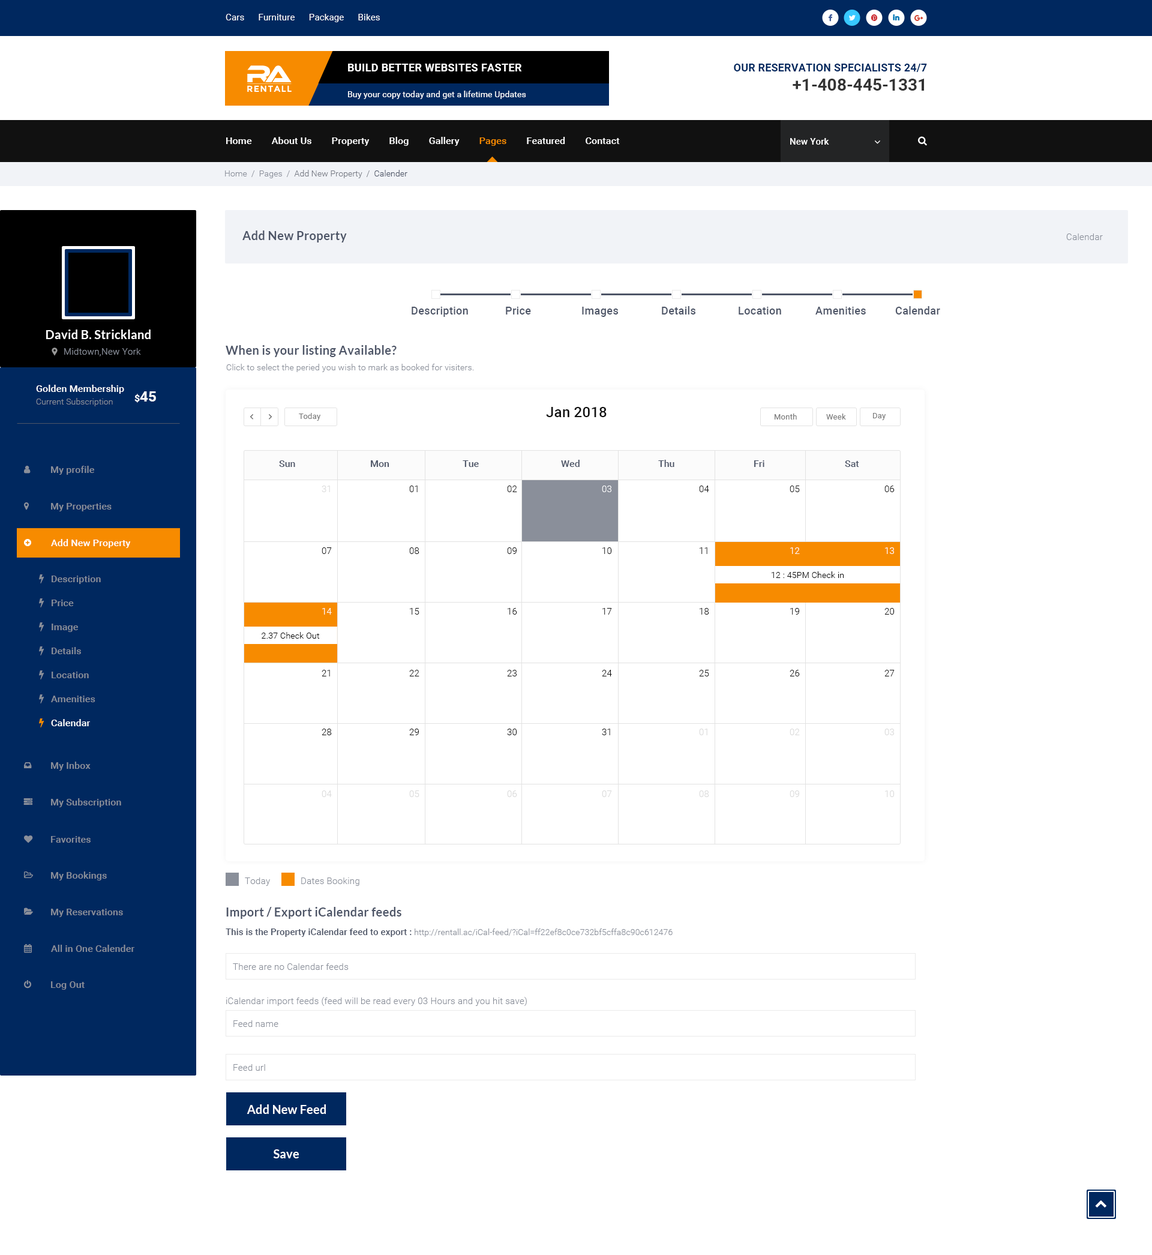
<style>
.page{position:relative;width:1152px;height:1255px;background:#ffffff}
.page>*{position:absolute;margin:0}
.t1{font:9px "Roboto-Regular";letter-spacing:0.01em;color:#ffffff}
.t2{font:10.8px "Roboto-Bold";letter-spacing:0.02em;color:#ffffff;text-transform:uppercase}
.t3{font:10.8px "Roboto-Bold";letter-spacing:0.01em;color:#00285f;text-transform:uppercase}
.t4{font:8.7px "Montserrat-Bold";letter-spacing:0.08em;color:#ffffff;text-transform:uppercase}
.t5{font:16.8px "Roboto-Bold";color:#333333}
.t6{font:8.4px "Roboto-Regular";letter-spacing:0.01em;color:#ffffff}
.t7{font:9.6px "Roboto-Medium";letter-spacing:0.01em;color:#ffffff}
.t8{font:9.6px "Roboto-Medium";letter-spacing:0.01em;color:#f78b00}
.t9{font:9px "Roboto-Medium";letter-spacing:0.01em;color:#ffffff}
.t10{font:8.4px "Roboto-Light";letter-spacing:0.01em;color:#757983}
.t11{font:8.4px "Roboto-Light";letter-spacing:0.01em;color:#8a8f9a}
.t12{font:8.4px "Roboto-Light";letter-spacing:0.01em;color:#4d5567}
.t13{font:12px "Lato-Bold";letter-spacing:0.01em;color:#4d5567}
.t14{font:9px "Roboto-Light";letter-spacing:0.01em;color:#8a8f9a}
.t15{font:10.8px "Roboto-Medium";letter-spacing:0.01em;color:#4d5567}
.t16{font:12px "Lato-Bold";letter-spacing:0.01em;color:#ffffff}
.t17{font:14.4px "Roboto-Bold";letter-spacing:0.01em;color:#ffffff}
.t18{font:9.6px "Roboto-Bold";letter-spacing:0.01em;color:#ffffff}
.t19{font:7.8px "Roboto-Regular";letter-spacing:0.02em;color:#7c7c7c}
.t20{font:14.4px "Roboto-Medium";letter-spacing:0.01em;color:#111111}
.t21{font:9.6px "Roboto-Medium";color:#4d5567}
.t22{font:9.6px "Roboto-Medium";letter-spacing:0.01em;color:#8a8f9a}
.t23{font:9px "Roboto-Light";letter-spacing:0.02em;color:#dadada}
.t24{font:9px "Roboto-Light";letter-spacing:0.02em;color:#111111}
.t25{font:9px "Roboto-Light";letter-spacing:0.02em;color:#ffffff}
.t26{font:9.6px/24px "Roboto-Medium";letter-spacing:0.01em;color:#8a8f9a}
.t27{font:9.6px/24px "Roboto-Medium";letter-spacing:0.01em;color:#ffffff}
.t28{font:8.4px "Roboto-Light";letter-spacing:0.02em;color:#000000}
.t29{font:9px "Roboto-Medium";letter-spacing:0.01em;color:#4d5567}
</style>
<div class="page">
<p class="t1" style="left:226px;top:14px;width:154px;height:8px">Cars      Furniture      Package      Bikes</p>
<p class="t2" style="left:348px;top:64px;width:174px;height:7px">Build better Websites Faster</p>
<p class="t3" style="left:734px;top:64px;width:193px;height:8px">Our Reservation Specialists 24/7</p>
<p class="t4" style="left:247px;top:85px;width:45px;height:7px">RentAll</p>
<p class="t5" style="left:793px;top:79px;width:131px;height:12px">+1-408-445-1331</p>
<p class="t6" style="left:348px;top:91px;width:178px;height:8px">Buy your copy today and get a lifetime Updates</p>
<p class="t7" style="left:226px;top:137px;width:394px;height:9px">Home        About Us        Property        Blog        Gallery        <span class="t8">Pages</span>        Featured        Contact</p>
<p class="t9" style="left:790px;top:138px;width:39px;height:7px">New York</p>
<p class="t10" style="left:225px;top:170px;width:182px;height:8px"><span class="t11">Home  /  Pages  /  </span>Add New Property  /  <span class="t12">Calender</span></p>
<p class="t13" style="left:242px;top:230px;width:105px;height:12px">Add New Property</p>
<p class="t14" style="left:1066px;top:233px;width:37px;height:7px">Calendar</p>
<p class="t15" style="left:412px;top:307px;width:56px;height:10px">Description</p>
<p class="t15" style="left:506px;top:307px;width:25px;height:7px">Price</p>
<p class="t15" style="left:582px;top:307px;width:36px;height:10px">Images</p>
<p class="t15" style="left:662px;top:306px;width:33px;height:8px">Details</p>
<p class="t15" style="left:739px;top:307px;width:42px;height:7px">Location</p>
<p class="t15" style="left:815px;top:307px;width:51px;height:7px">Amenities</p>
<p class="t15" style="left:895px;top:306px;width:45px;height:8px">Calendar</p>
<p class="t16" style="left:46px;top:329px;width:105px;height:10px">David B. Strickland</p>
<p class="t14" style="left:64px;top:348px;width:77px;height:8px">Midtown,New York</p>
<p class="t13" style="left:226px;top:345px;width:171px;height:12px">When is your listing Available?</p>
<p class="t11" style="left:226px;top:364px;width:248px;height:8px">Click to select the peried you wish to mark as booked for visiters.</p>
<p class="t7" style="left:36px;top:385px;width:88px;height:9px">Golden Membership</p>
<p class="t11" style="left:36px;top:398px;width:77px;height:8px">Current Subscription</p>
<p class="t17" style="left:134px;top:391px;width:22px;height:12px"><span class="t18">$</span>45</p>
<p class="t19" style="left:299px;top:413px;width:22px;height:8px">Today</p>
<p class="t20" style="left:546px;top:407px;width:61px;height:10px">Jan 2018</p>
<p class="t19" style="left:775px;top:413px;width:22px;height:6px">Month</p>
<p class="t19" style="left:826px;top:413px;width:20px;height:6px">Week</p>
<p class="t19" style="left:873px;top:413px;width:13px;height:7px">Day</p>
<p class="t21" style="left:279px;top:460px;width:16px;height:7px">Sun</p>
<p class="t21" style="left:371px;top:460px;width:18px;height:7px">Mon</p>
<p class="t21" style="left:463px;top:460px;width:16px;height:7px">Tue</p>
<p class="t21" style="left:561px;top:460px;width:19px;height:7px">Wed</p>
<p class="t21" style="left:658px;top:460px;width:16px;height:7px">Thu</p>
<p class="t21" style="left:754px;top:460px;width:10px;height:7px">Fri</p>
<p class="t21" style="left:845px;top:460px;width:14px;height:7px">Sat</p>
<p class="t22" style="left:51px;top:466px;width:43px;height:9px">My profile</p>
<p class="t23" style="left:322px;top:485px;width:8px;height:7px">31</p>
<p class="t24" style="left:409px;top:485px;width:9px;height:7px">01</p>
<p class="t24" style="left:507px;top:485px;width:10px;height:7px">02</p>
<p class="t25" style="left:602px;top:485px;width:9px;height:7px">03</p>
<p class="t24" style="left:699px;top:485px;width:10px;height:7px">04</p>
<p class="t24" style="left:790px;top:485px;width:10px;height:7px">05</p>
<p class="t24" style="left:884px;top:485px;width:11px;height:7px">06</p>
<p class="t22" style="left:51px;top:503px;width:61px;height:8px">My Properties</p>
<p class="t7" style="left:51px;top:539px;width:80px;height:9px">Add New Property</p>
<p class="t24" style="left:322px;top:547px;width:10px;height:7px">07</p>
<p class="t24" style="left:409px;top:547px;width:10px;height:7px">08</p>
<p class="t24" style="left:507px;top:547px;width:10px;height:7px">09</p>
<p class="t24" style="left:602px;top:547px;width:10px;height:7px">10</p>
<p class="t24" style="left:700px;top:547px;width:7px;height:7px">11</p>
<p class="t25" style="left:790px;top:547px;width:10px;height:7px">12</p>
<p class="t25" style="left:885px;top:547px;width:9px;height:7px">13</p>
<p class="t26" style="left:51px;top:575px;width:50px;height:151px">Description<br>Price<br>Image<br>Details<br>Location<br>Amenities<br><span class="t27">Calendar</span></p>
<p class="t28" style="left:772px;top:571px;width:72px;height:7px">12 : 45PM Check in</p>
<p class="t25" style="left:322px;top:608px;width:10px;height:6px">14</p>
<p class="t24" style="left:410px;top:608px;width:9px;height:6px">15</p>
<p class="t24" style="left:508px;top:608px;width:9px;height:6px">16</p>
<p class="t24" style="left:602px;top:608px;width:10px;height:6px">17</p>
<p class="t24" style="left:700px;top:608px;width:9px;height:6px">18</p>
<p class="t24" style="left:790px;top:608px;width:9px;height:6px">19</p>
<p class="t24" style="left:884px;top:608px;width:11px;height:6px">20</p>
<p class="t28" style="left:262px;top:632px;width:58px;height:6px">2.37 Check Out</p>
<p class="t24" style="left:322px;top:670px;width:8px;height:6px">21</p>
<p class="t24" style="left:409px;top:670px;width:10px;height:6px">22</p>
<p class="t24" style="left:507px;top:670px;width:10px;height:6px">23</p>
<p class="t24" style="left:602px;top:670px;width:10px;height:6px">24</p>
<p class="t24" style="left:699px;top:670px;width:10px;height:6px">25</p>
<p class="t24" style="left:790px;top:670px;width:10px;height:6px">26</p>
<p class="t24" style="left:884px;top:670px;width:11px;height:6px">27</p>
<p class="t24" style="left:322px;top:728px;width:10px;height:7px">28</p>
<p class="t24" style="left:409px;top:728px;width:10px;height:7px">29</p>
<p class="t24" style="left:507px;top:728px;width:10px;height:7px">30</p>
<p class="t24" style="left:602px;top:728px;width:8px;height:7px">31</p>
<p class="t23" style="left:699px;top:728px;width:8px;height:7px">01</p>
<p class="t23" style="left:790px;top:728px;width:10px;height:7px">02</p>
<p class="t23" style="left:884px;top:728px;width:10px;height:7px">03</p>
<p class="t22" style="left:51px;top:761px;width:40px;height:9px">My Inbox</p>
<p class="t22" style="left:51px;top:798px;width:70px;height:9px">My Subscription</p>
<p class="t23" style="left:322px;top:790px;width:10px;height:7px">04</p>
<p class="t23" style="left:409px;top:790px;width:10px;height:7px">05</p>
<p class="t23" style="left:507px;top:790px;width:10px;height:7px">06</p>
<p class="t23" style="left:602px;top:790px;width:10px;height:7px">07</p>
<p class="t23" style="left:699px;top:790px;width:10px;height:7px">08</p>
<p class="t23" style="left:790px;top:790px;width:9px;height:7px">09</p>
<p class="t23" style="left:885px;top:790px;width:10px;height:7px">10</p>
<p class="t22" style="left:51px;top:836px;width:40px;height:6px">Favorites</p>
<p class="t22" style="left:51px;top:871px;width:56px;height:9px">My Bookings</p>
<p class="t14" style="left:245px;top:877px;width:25px;height:9px">Today</p>
<p class="t14" style="left:301px;top:877px;width:58px;height:9px">Dates Booking</p>
<p class="t22" style="left:51px;top:908px;width:72px;height:9px">My Reservations</p>
<p class="t13" style="left:226px;top:907px;width:175px;height:12px">Import / Export iCalendar feeds</p>
<p class="t11" style="left:226px;top:928px;width:447px;height:9px"><span class="t29">This is the Property iCalendar feed to export : </span>http://rentall.ac/iCal-feed/?iCal=ff22ef8c0ce732bf5cffa8c90c612476</p>
<p class="t22" style="left:51px;top:944px;width:83px;height:8px">All in One Calender</p>
<p class="t14" style="left:233px;top:963px;width:116px;height:7px">There are no Calendar feeds</p>
<p class="t22" style="left:51px;top:981px;width:34px;height:8px">Log Out</p>
<p class="t14" style="left:226px;top:997px;width:301px;height:9px">iCalendar import feeds (feed will be read every 03 Hours and you hit save)</p>
<p class="t14" style="left:233px;top:1020px;width:45px;height:7px">Feed name</p>
<p class="t14" style="left:233px;top:1064px;width:32px;height:6px">Feed url</p>
<p class="t16" style="left:247px;top:1104px;width:79px;height:10px">Add New Feed</p>
<p class="t16" style="left:273px;top:1149px;width:26px;height:9px">Save</p>
</div>
